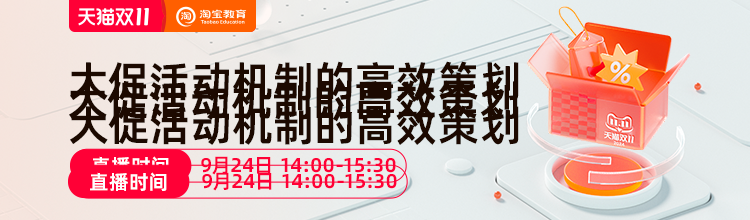
<style>
.page{position:relative;width:750px;height:220px}
.page>*{position:absolute;margin:0}
.t1{font:42px "AlibabaPuHuiTi_2_85_Bold";letter-spacing:0.01em;color:#1c0900}
.t2{font:20px "AlibabaPuHuiTi_2_85_Bold";letter-spacing:0.02em}
.t3{font:20px "AlibabaPuHuiTi_2_85_Bold";letter-spacing:0.02em;color:#ff0036}
.t4{font:20px "AlibabaPuHuiTi_2_85_Bold";letter-spacing:0.02em;color:#ffffff}
</style>
<div class="page">
<p class="t1" style="left:70px;top:61px;width:449px;height:40px">大促活动机制的高效策划</p>
<p class="t1" style="left:69px;top:80px;width:449px;height:40px">大促活动机制的高效策划</p>
<p class="t1" style="left:70px;top:105px;width:449px;height:40px">大促活动机制的高效策划</p>
<p class="t2" style="left:92px;top:156px;width:77px;height:19px">直播时间</p>
<p class="t3" style="left:201px;top:156px;width:195px;height:19px">9月24日 14:00-15:30</p>
<p class="t4" style="left:90px;top:172px;width:77px;height:19px">直播时间</p>
<p class="t3" style="left:202px;top:172px;width:195px;height:19px">9月24日 14:00-15:30</p>
</div>
